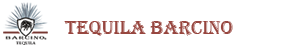
<style>
.page{position:relative;width:284px;height:47px;background:#ffffff}
.page>*{position:absolute;margin:0}
.t1{font:19.9px "Algerian";color:#97463f}
</style>
<div class="page">
<p class="t1" style="left:64px;top:21px;width:169px;height:15px">tequila barcino</p>
</div>
